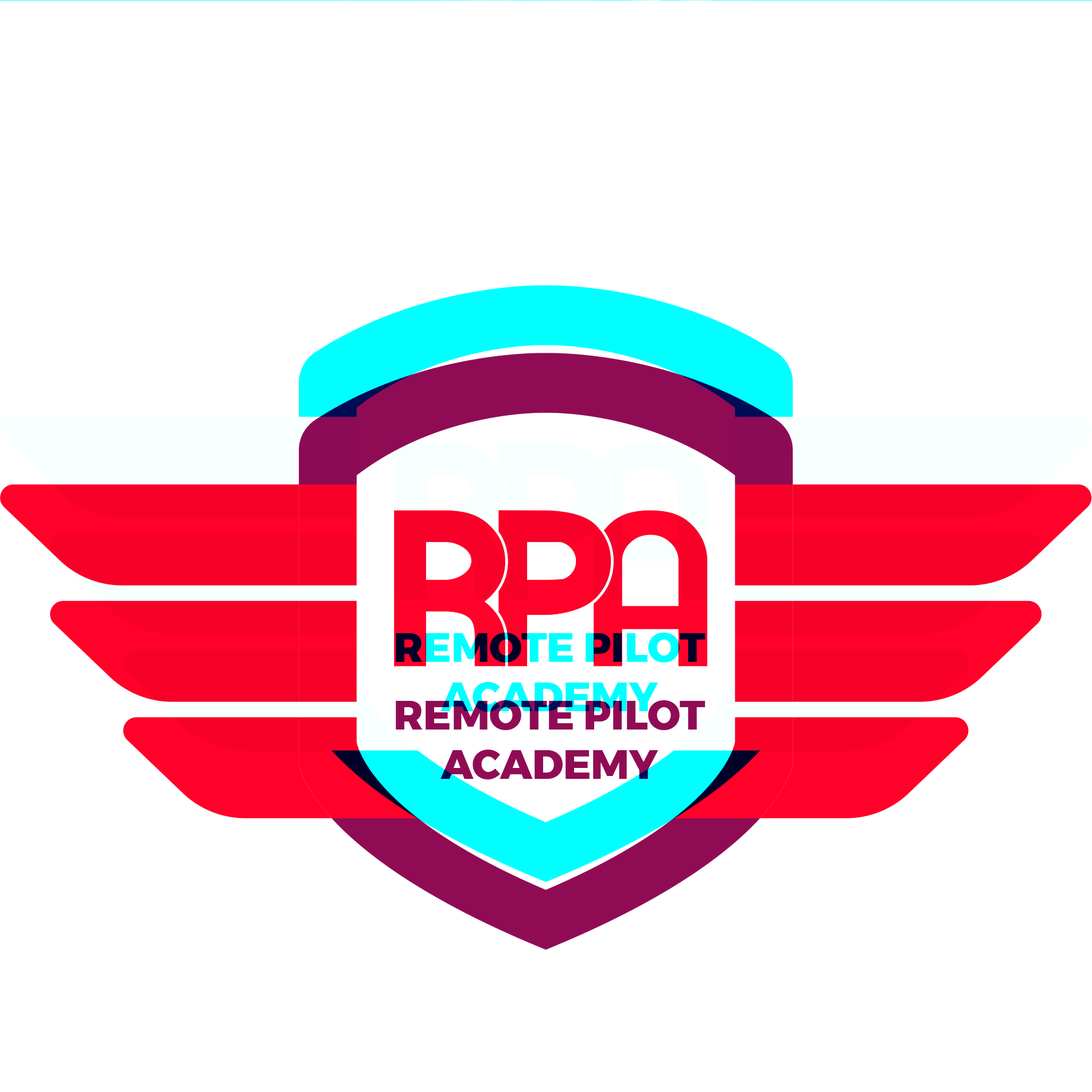
<style>
.page{position:relative;width:1092px;height:1092px;background:#ffffff}
.page>*{position:absolute;margin:0}
.t1{font:40.8px "Montserrat-ExtraBold"}
</style>
<div class="page">
<p class="t1" style="left:396px;top:632px;width:309px;height:79px;text-align:center">REMOTE PILOT<br>ACADEMY</p>
</div>
